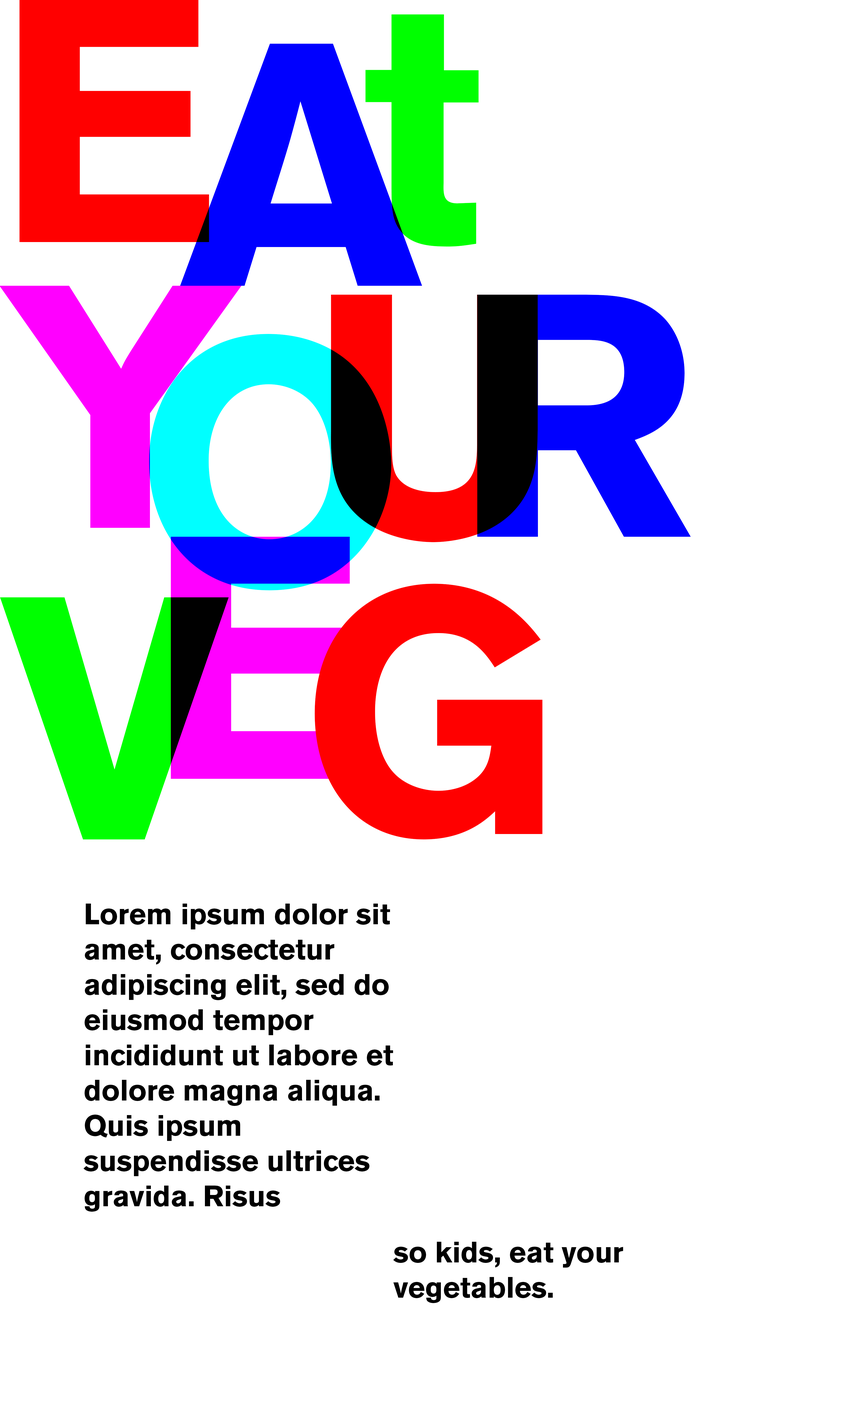
<style>
.page{position:relative;width:846px;height:1410px;background:#ffffff}
.page>*{position:absolute;margin:0}
.t1{font:342.6px "AkzidenzGroteskBE-Bold";color:#ff0000}
.t2{font:342.6px "AkzidenzGroteskBE-Bold";color:#00ff00}
.t3{font:342.6px "AkzidenzGroteskBE-Bold";color:#0000ff}
.t4{font:342.6px "AkzidenzGroteskBE-Bold";color:#000000}
.t5{font:342.6px "AkzidenzGroteskBE-Bold"}
.t6{font:29.4px "AkzidenzGroteskBE-Bold";color:#000000}
</style>
<div class="page">
<p class="t1" style="left:20px;top:0px;width:189px;height:242px">E</p>
<p class="t2" style="left:365px;top:14px;width:114px;height:232px">t</p>
<p class="t3" style="left:180px;top:43px;width:242px;height:243px">A</p>
<p class="t4" style="left:331px;top:294px;width:207px;height:248px">U</p>
<p class="t5" style="left:477px;top:294px;width:214px;height:243px">R</p>
<p class="t5" style="left:149px;top:334px;width:242px;height:256px">O</p>
<p class="t5" style="left:171px;top:537px;width:189px;height:242px">E</p>
<p class="t1" style="left:315px;top:583px;width:228px;height:256px">G</p>
<p class="t2" style="left:0px;top:597px;width:229px;height:242px">V</p>
<p class="t6" style="left:83px;top:903px;width:310px;height:308px">Lorem ipsum dolor sit amet, consectetur adipiscing elit, sed do eiusmod tempor incididunt ut labore et dolore magna aliqua. Quis ipsum suspendisse ultrices gravida. Risus commodo viverra maecenas accumsan lacus vel facilisis.</p>
<p class="t6" style="left:393px;top:1242px;width:230px;height:61px">so kids, eat your vegetables.</p>
</div>
